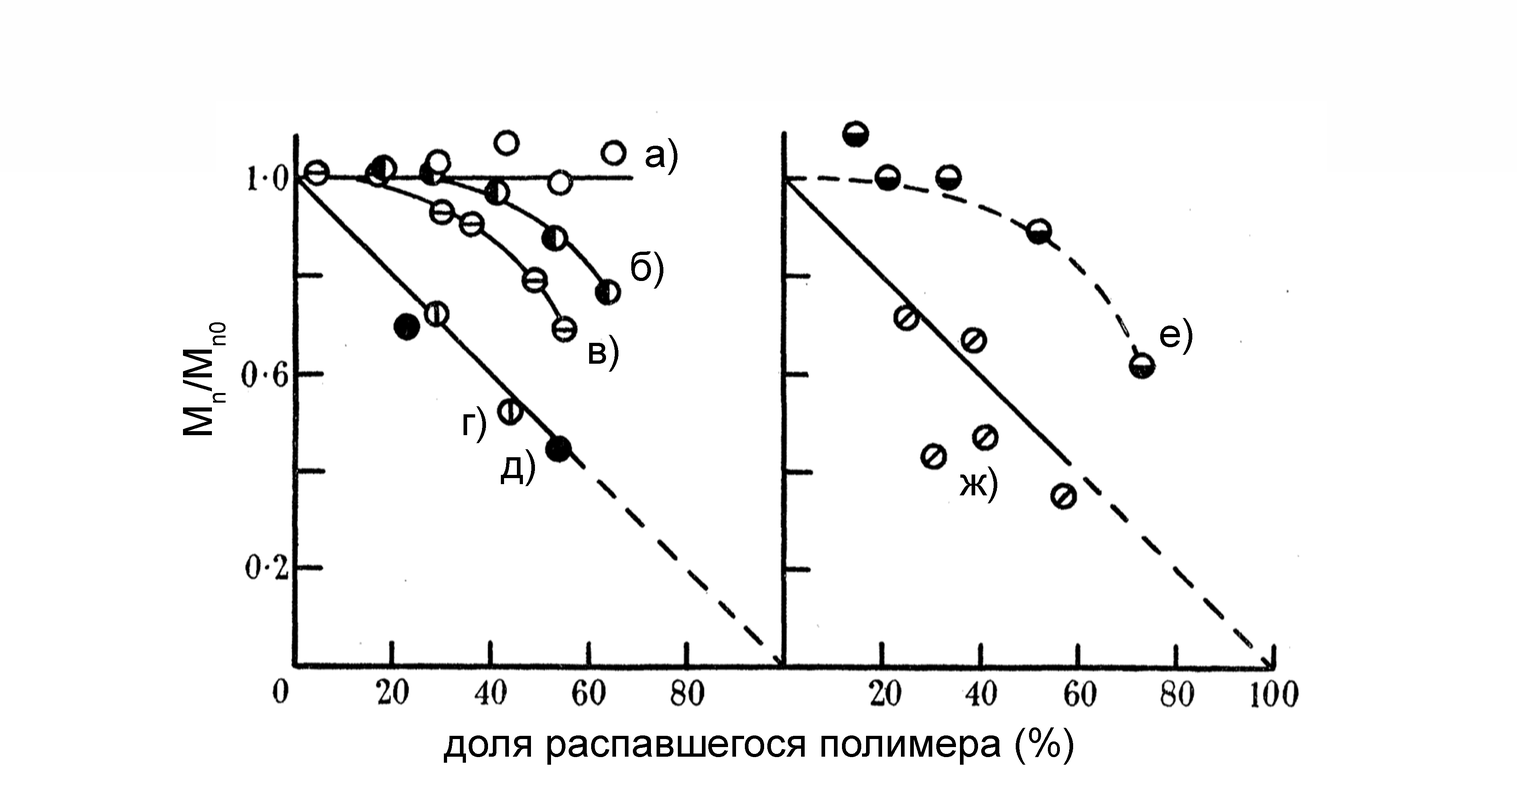
<style>
.page{position:relative;width:1517px;height:786px;background:#ffffff}
.page>*{position:absolute;margin:0}
.t1{font:40.1px "ArialMT";color:#000000}
</style>
<div class="page">
<p class="t1" style="left:646px;top:138px;width:32px;height:37px">a)</p>
<p class="t1" style="left:631px;top:251px;width:32px;height:38px">б)</p>
<p class="t1" style="left:1160px;top:318px;width:33px;height:37px">е)</p>
<p class="t1" style="left:183px;top:322px;width:43px;height:113px;rotate:-90deg">Mn/Mn0</p>
<p class="t1" style="left:589px;top:335px;width:30px;height:37px">в)</p>
<p class="t1" style="left:464px;top:406px;width:22px;height:37px">г)</p>
<p class="t1" style="left:501px;top:449px;width:34px;height:37px">д)</p>
<p class="t1" style="left:960px;top:466px;width:37px;height:37px">ж)</p>
<p class="t1" style="left:444px;top:727px;width:629px;height:38px">доля распавшегося полимера (%)</p>
</div>
